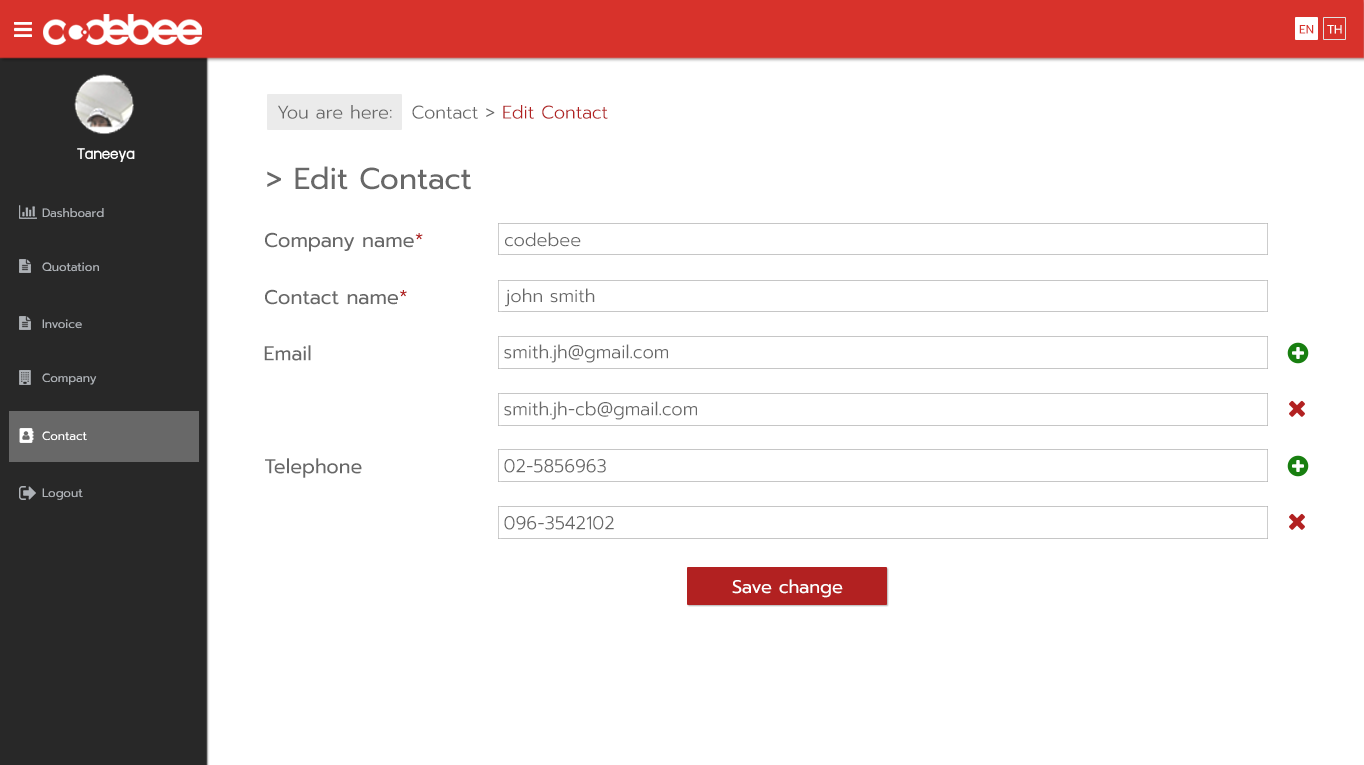
<style>
.page{position:relative;width:1364px;height:765px;background:#ffffff}
.page>*{position:absolute;margin:0}
.t1{font:12px "Prompt-Regular";color:#d8322b}
.t2{font:12px "Prompt-Regular";color:#ffffff}
.t3{font:18px "Prompt-Light";color:#686868}
.t4{font:18px "Prompt-Light";color:#b22121}
.t5{font:18px "supermarket";color:#ffffff}
.t6{font:30px "Prompt-Regular";color:#686868}
.t7{font:12px "Prompt-Regular";color:#aeb2b7}
.t8{font:20px "Prompt-Regular";color:#686868}
.t9{font:20px "Prompt-Regular";color:#b22121}
.t10{font:18.5px "Prompt-Light";color:#686868}
.t11{font:18px "Prompt-Regular";color:#ffffff}
</style>
<div class="page">
<p class="t1" style="left:1299px;top:25px;width:15px;height:9px">EN</p>
<p class="t2" style="left:1327px;top:25px;width:15px;height:9px">TH</p>
<p class="t3" style="left:278px;top:105px;width:114px;height:14px">You are here:</p>
<p class="t4" style="left:412px;top:105px;width:196px;height:14px"><span class="t3">Contact &gt; </span>Edit Contact</p>
<p class="t5" style="left:77px;top:148px;width:58px;height:14px">Taneeya</p>
<p class="t6" style="left:267px;top:166px;width:204px;height:24px">&gt; Edit Contact</p>
<p class="t7" style="left:42px;top:208px;width:62px;height:10px">Dashboard</p>
<p class="t8" style="left:265px;top:232px;width:158px;height:20px">Company name<span class="t9">*</span></p>
<p class="t3" style="left:505px;top:232px;width:76px;height:15px">codebee</p>
<p class="t7" style="left:42px;top:262px;width:57px;height:10px">Quotation</p>
<p class="t8" style="left:265px;top:289px;width:142px;height:16px">Contact name<span class="t9">*</span></p>
<p class="t3" style="left:505px;top:288px;width:90px;height:19px">john smith</p>
<p class="t7" style="left:42px;top:319px;width:40px;height:10px">Invoice</p>
<p class="t8" style="left:264px;top:345px;width:47px;height:16px">Email</p>
<p class="t10" style="left:504px;top:344px;width:164px;height:19px">smith.jh@gmail.com</p>
<p class="t7" style="left:42px;top:373px;width:55px;height:12px">Company</p>
<p class="t10" style="left:504px;top:401px;width:193px;height:19px">smith.jh-cb@gmail.com</p>
<p class="t2" style="left:42px;top:431px;width:45px;height:10px">Contact</p>
<p class="t8" style="left:265px;top:458px;width:97px;height:20px">Telephone</p>
<p class="t10" style="left:504px;top:459px;width:102px;height:14px">02-5856963</p>
<p class="t7" style="left:42px;top:488px;width:41px;height:12px">Logout</p>
<p class="t10" style="left:504px;top:516px;width:110px;height:14px">096-3542102</p>
<p class="t11" style="left:732px;top:579px;width:111px;height:19px">Save change</p>
</div>
